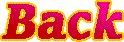
<style>
.page{position:relative;width:124px;height:42px;background:#ffffff}
.page>*{position:absolute;margin:0}
.t1{font:52.9px "SitkaText-BoldItalic";font-weight:bold;scale:0.93 1}
</style>
<div class="page">
<p class="t1" style="left:2px;top:2px;width:120px;height:38px">Back</p>
</div>
